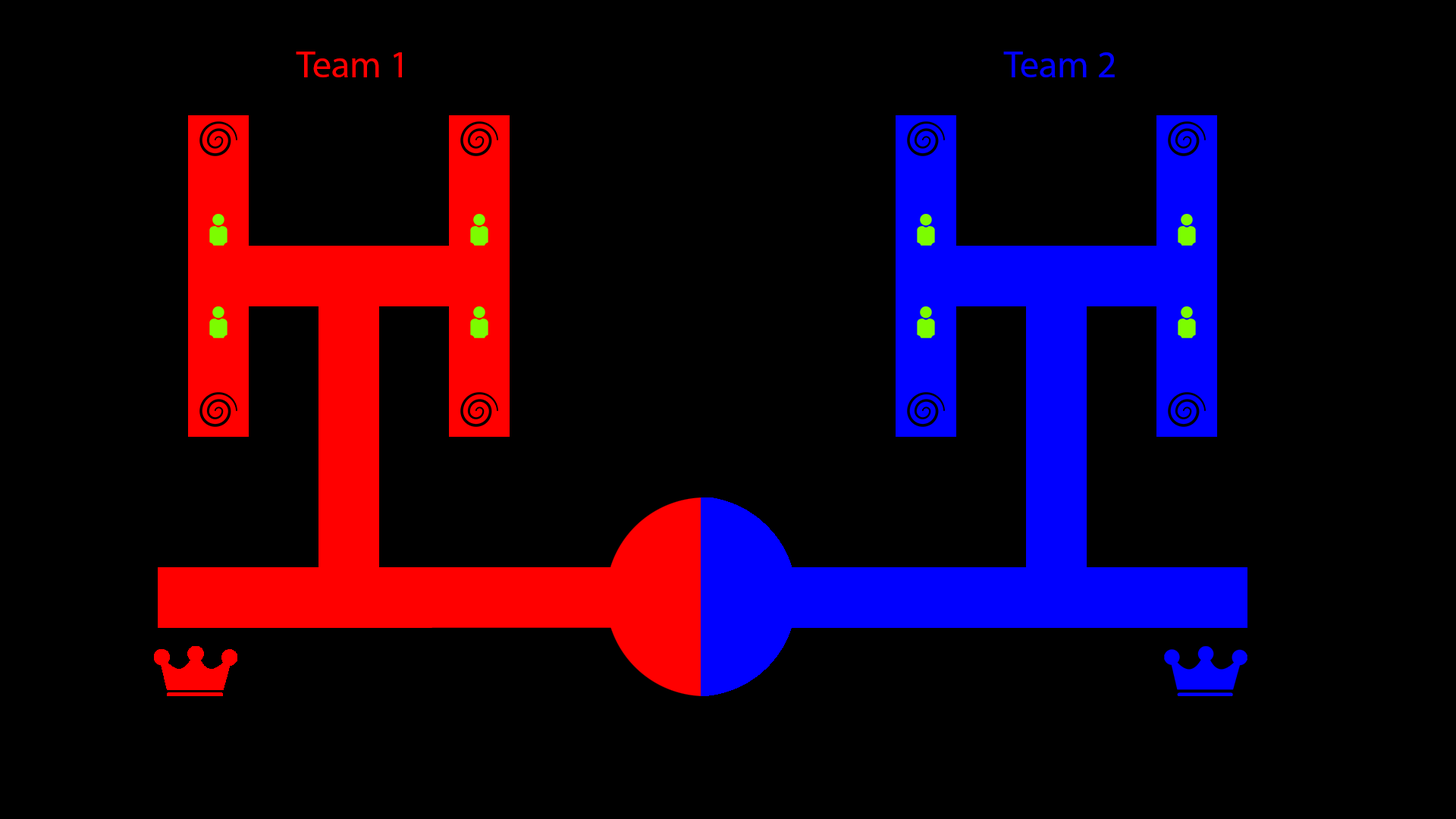
<style>
.page{position:relative;width:1456px;height:819px;background:#000000}
.page>*{position:absolute;margin:0}
.t1{font:37.9px "MyriadPro-Regular";color:#ff0000}
.t2{font:37.9px "MyriadPro-Regular";color:#0000ff}
</style>
<div class="page">
<p class="t1" style="left:296px;top:52px;width:106px;height:25px">Team 1</p>
<p class="t2" style="left:1003px;top:52px;width:112px;height:25px">Team 2</p>
</div>
